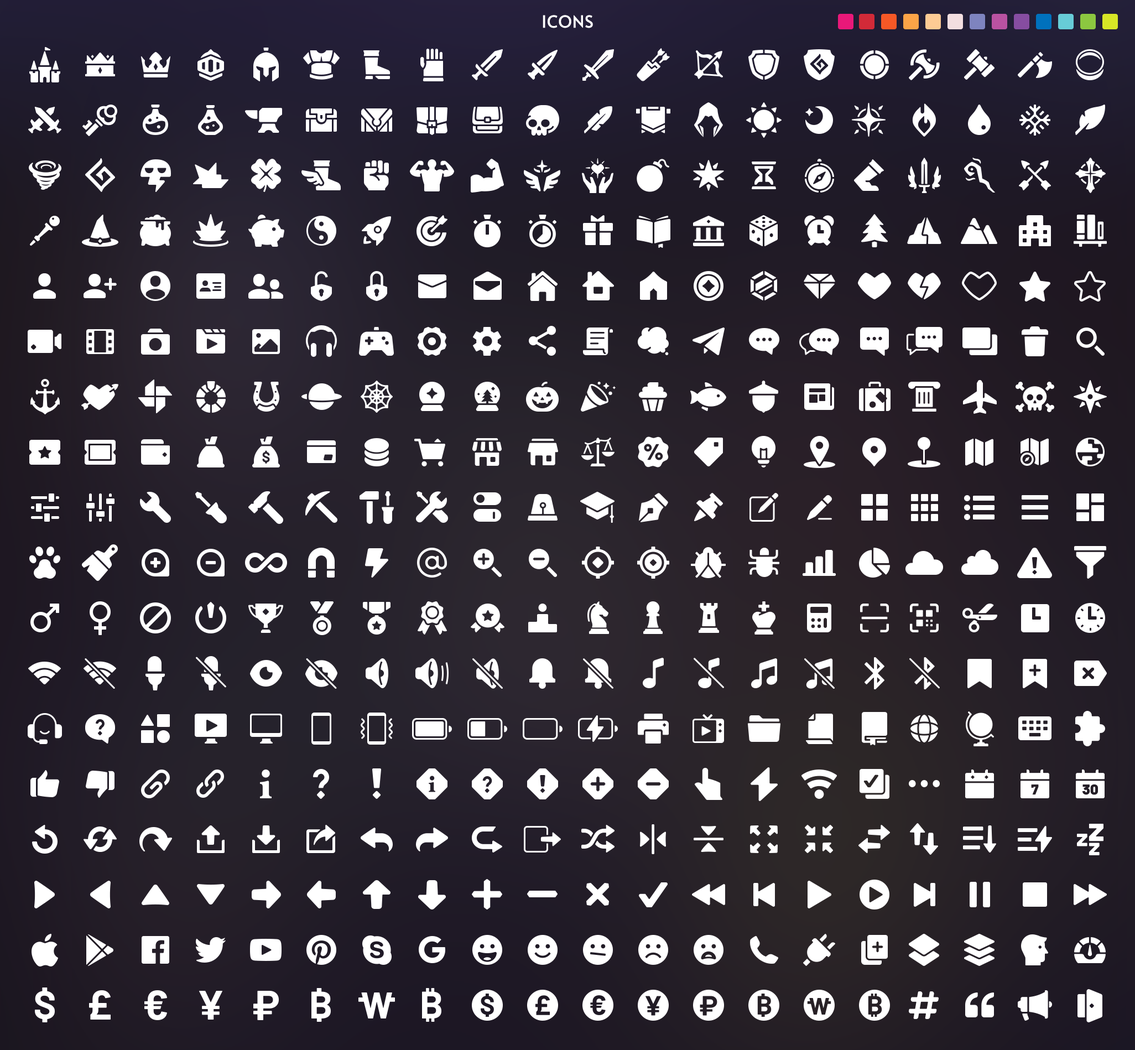
<style>
.page{position:relative;width:1135px;height:1050px}
.page>*{position:absolute;margin:0}
.t1{font:16.6px "Alata-Regular";color:#ffffff;font-weight:bold}
</style>
<div class="page">
<p class="t1" style="left:543px;top:15px;width:50px;height:13px">ICONS</p>
</div>
